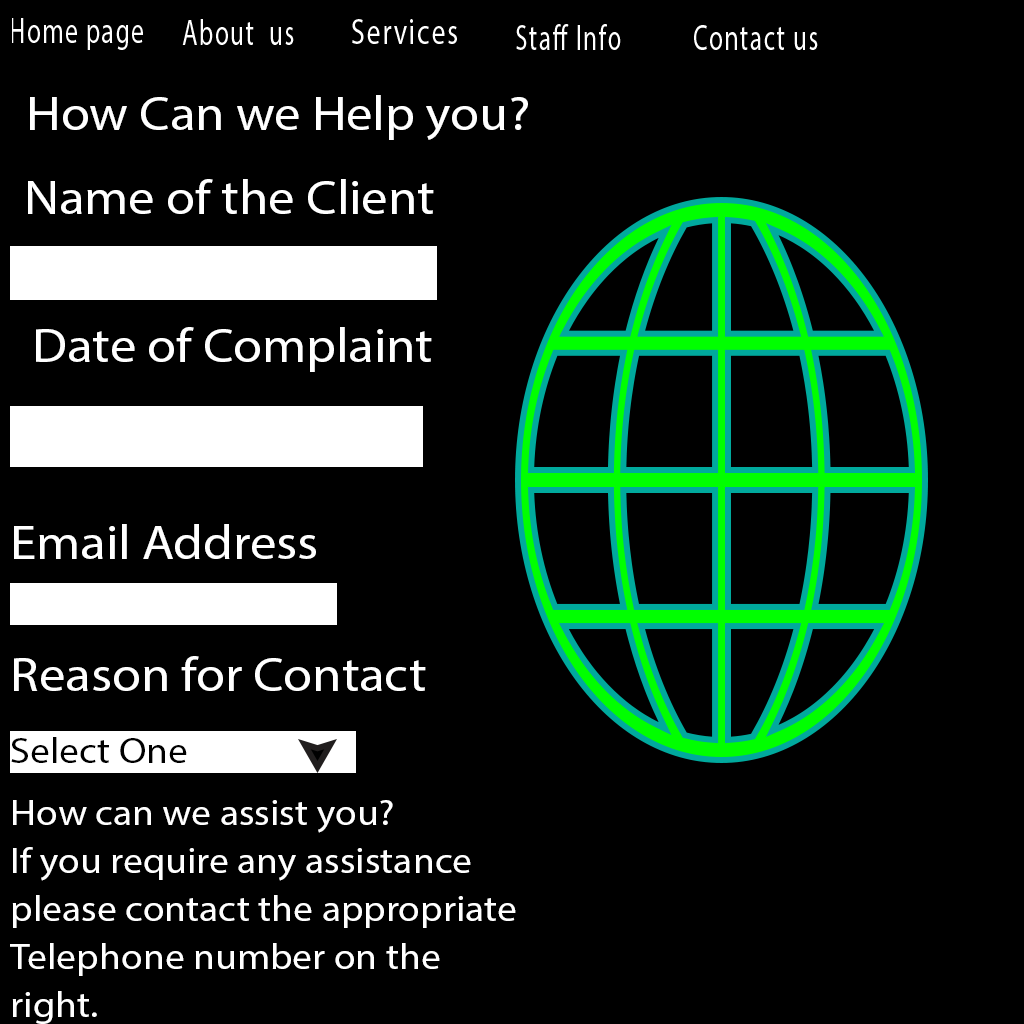
<style>
.page{position:relative;width:1024px;height:1024px;background:#000000}
.page>*{position:absolute;margin:0}
.t1{font:48px "MyriadPro-Regular";color:#ffffff;scale:1.1 1}
.t2{font:36px "MyriadPro-Regular";color:#000000;scale:1.1 1}
.t3{font:36.1px/16px "MyriadPro-Regular";color:#ffffff;scale:1.1 1}
</style>
<div class="page">
<p class="t1" style="left:30px;top:95px;width:498px;height:45px">How Can we Help you?</p>
<p class="t1" style="left:28px;top:179px;width:406px;height:35px">Name of the Client</p>
<p class="t1" style="left:36px;top:327px;width:396px;height:45px">Date of Complaint</p>
<p class="t1" style="left:14px;top:524px;width:302px;height:35px">Email Address</p>
<p class="t1" style="left:14px;top:656px;width:412px;height:35px">Reason for Contact</p>
<p class="t2" style="left:11px;top:737px;width:176px;height:26px">Select One</p>
<p class="t3" style="left:10px;top:800px;width:506px;height:224px">How can we assist you?<br><br><br>If you require any assistance<br><br><br>please contact the appropriate<br><br><br>Telephone number on the <br><br><br>right.</p>
</div>
